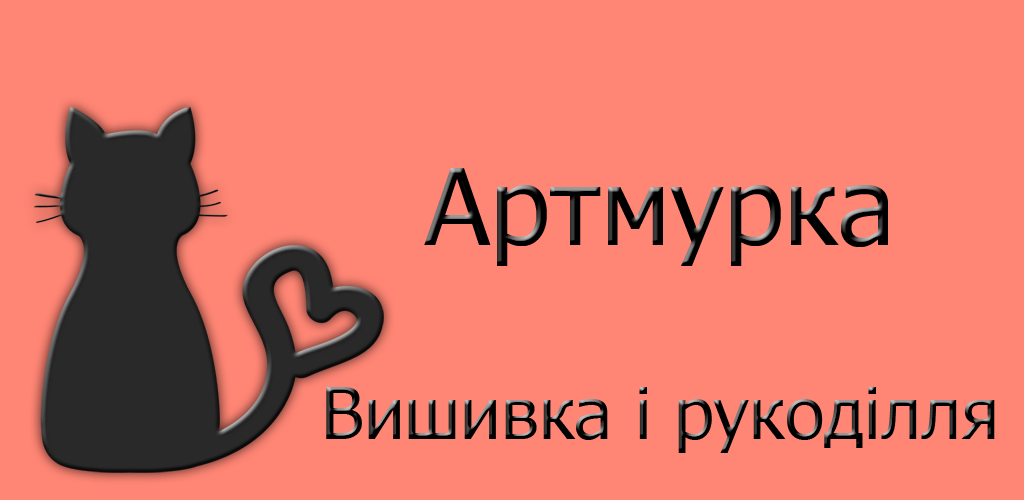
<style>
.page{position:relative;width:1024px;height:500px;background:#ff8574}
.page>*{position:absolute;margin:0}
.t1{font:106.3px "Tahoma";color:#000000}
.t2{font:72px "Tahoma"}
</style>
<div class="page">
<p class="t1" style="left:424px;top:168px;width:464px;height:98px">Артмурка</p>
<p class="t2" style="left:326px;top:387px;width:669px;height:66px">Вишивка і рукоділля</p>
</div>
